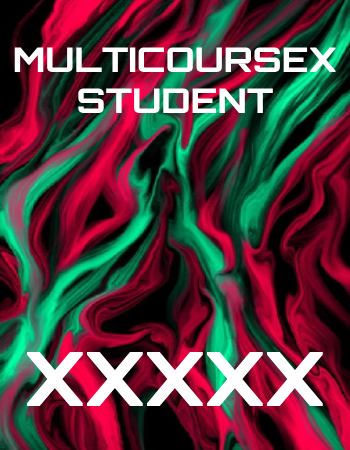
<style>
.page{position:relative;width:350px;height:450px}
.page>*{position:absolute;margin:0}
.t1{font:34px "Orbitron-Bold";color:#ffffff;font-weight:bold}
.t2{font:75px "Orbitron-Bold";color:#ffffff;font-weight:bold}
</style>
<div class="page">
<p class="t1" style="left:14px;top:47px;width:322px;height:66px;text-align:center">MULTICOURSEX<br>STUDENT</p>
<p class="t2" style="left:27px;top:352px;width:56px;height:54px">X</p>
<p class="t2" style="left:87px;top:352px;width:56px;height:54px">X</p>
<p class="t2" style="left:147px;top:352px;width:56px;height:54px">X</p>
<p class="t2" style="left:207px;top:352px;width:56px;height:54px">X</p>
<p class="t2" style="left:267px;top:352px;width:56px;height:54px">X</p>
</div>
